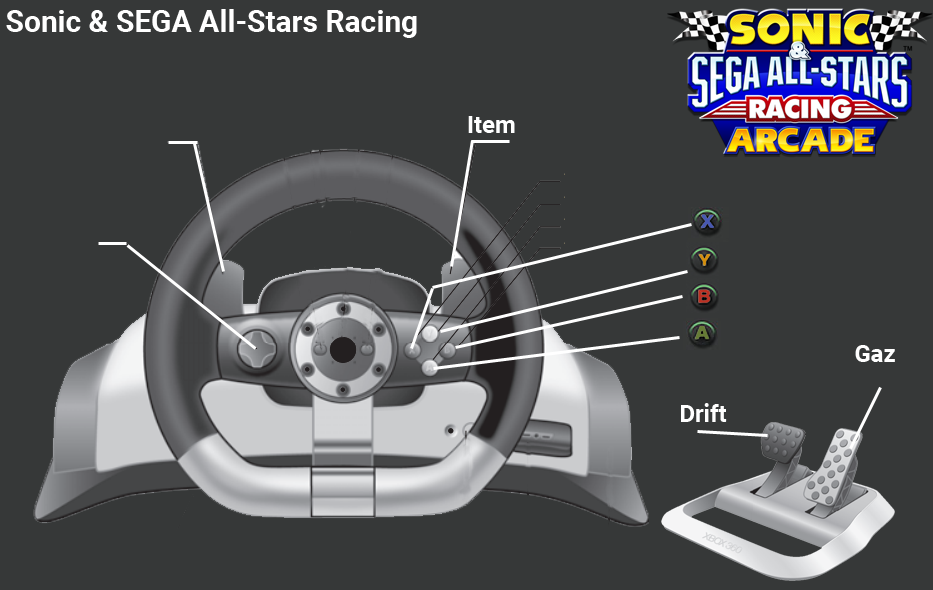
<style>
.page{position:relative;width:933px;height:590px;background:#363838}
.page>*{position:absolute;margin:0}
.t1{font:30px "Roboto-Bold";color:#ffffff}
.t2{font:24px "Roboto-Bold";color:#ffffff}
</style>
<div class="page">
<p class="t1" style="left:6px;top:9px;width:411px;height:29px">Sonic &amp; SEGA All-Stars Racing</p>
<p class="t2" style="left:468px;top:116px;width:47px;height:17px">Item</p>
<p class="t2" style="left:855px;top:345px;width:40px;height:17px">Gaz</p>
<p class="t2" style="left:681px;top:403px;width:46px;height:19px">Drift</p>
</div>
